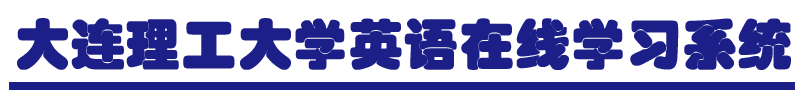
<style>
.page{position:relative;width:804px;height:105px;background:#ffffff}
.page>*{position:absolute;margin:0}
.t1{font:54.2px "STHupo";color:#1d2088;font-weight:bold}
</style>
<div class="page">
<p class="t1" style="left:17px;top:18px;width:774px;height:52px">大连理工大学英语在线学习系统</p>
</div>
